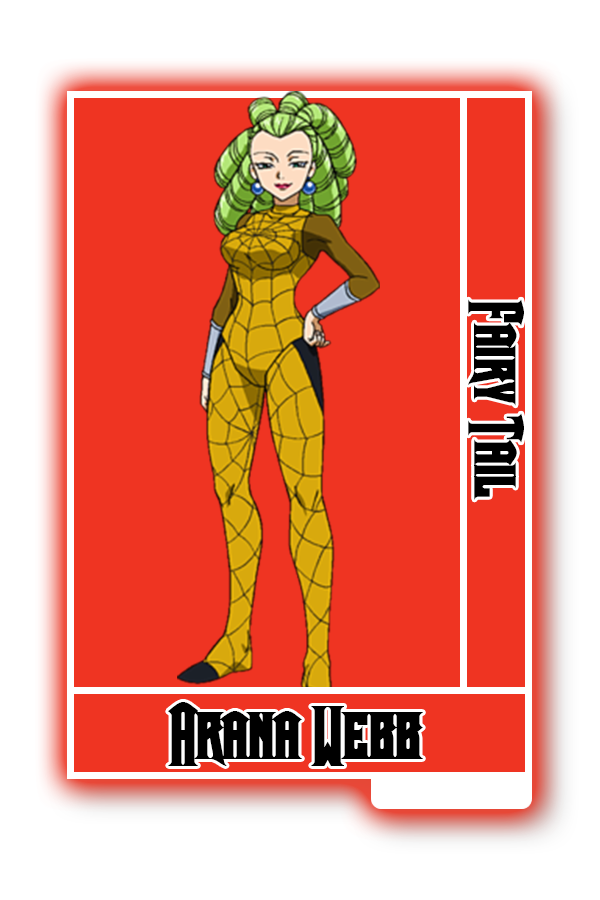
<style>
.page{position:relative;width:600px;height:900px;background:#ef3422}
.page>*{position:absolute;margin:0}
.t1{font:61.5px "Crown-Title";color:#000000}
.t2{font:70.1px "Crown-Title";color:#000000}
</style>
<div class="page">
<p class="t1" style="left:468px;top:299px;width:56px;height:201px;rotate:90deg">Fairy Tail</p>
<p class="t2" style="left:168px;top:702px;width:255px;height:64px">Arana Webb</p>
</div>
